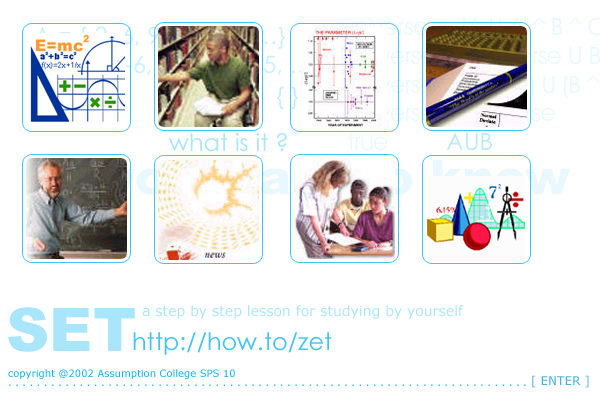
<style>
.page{position:relative;width:600px;height:400px;background:#ffffff}
.page>*{position:absolute;margin:0}
.t1{font:24px "CenturyGothic";color:#a9e5fb}
.t2{font:14px "Verdana";color:#a9e5fb}
.t3{font:60px "Arial-Black";color:#a9e5fb}
.t4{font:24px "CenturyGothic";color:#41c3f3}
.t5{font:10px "Verdana";color:#11b4f0}
.t6{font:12px "Verdana";color:#46b1dd}
.t7{font:10px "Verdana";color:#19b6f1}
</style>
<div class="page">
<p class="t1" style="left:277px;top:86px;width:21px;height:23px;opacity:0.74">{ }</p>
<p class="t1" style="left:169px;top:133px;width:118px;height:19px">what is it ?</p>
<p class="t1" style="left:446px;top:132px;width:46px;height:19px;opacity:0.8">AUB</p>
<p class="t2" style="left:142px;top:305px;width:322px;height:14px">a step by step lesson for studying by yourself</p>
<p class="t3" style="left:8px;top:307px;width:127px;height:45px">SET</p>
<p class="t4" style="left:133px;top:332px;width:199px;height:23px">http://how.to/zet</p>
<p class="t5" style="left:8px;top:369px;width:227px;height:10px">copyright @2002 Assumption College SPS 10</p>
<p class="t6" style="left:532px;top:375px;width:57px;height:13px">[ ENTER ]</p>
<p class="t7" style="left:9px;top:384px;width:517px;height:2px">. . . . . . . . . . . . . . . . . . . . . . . . . . . . . . . . . . . . . . . . . . . . . . . . . . . . . . . . . . . . . . . . . . . . . . . . .</p>
</div>
